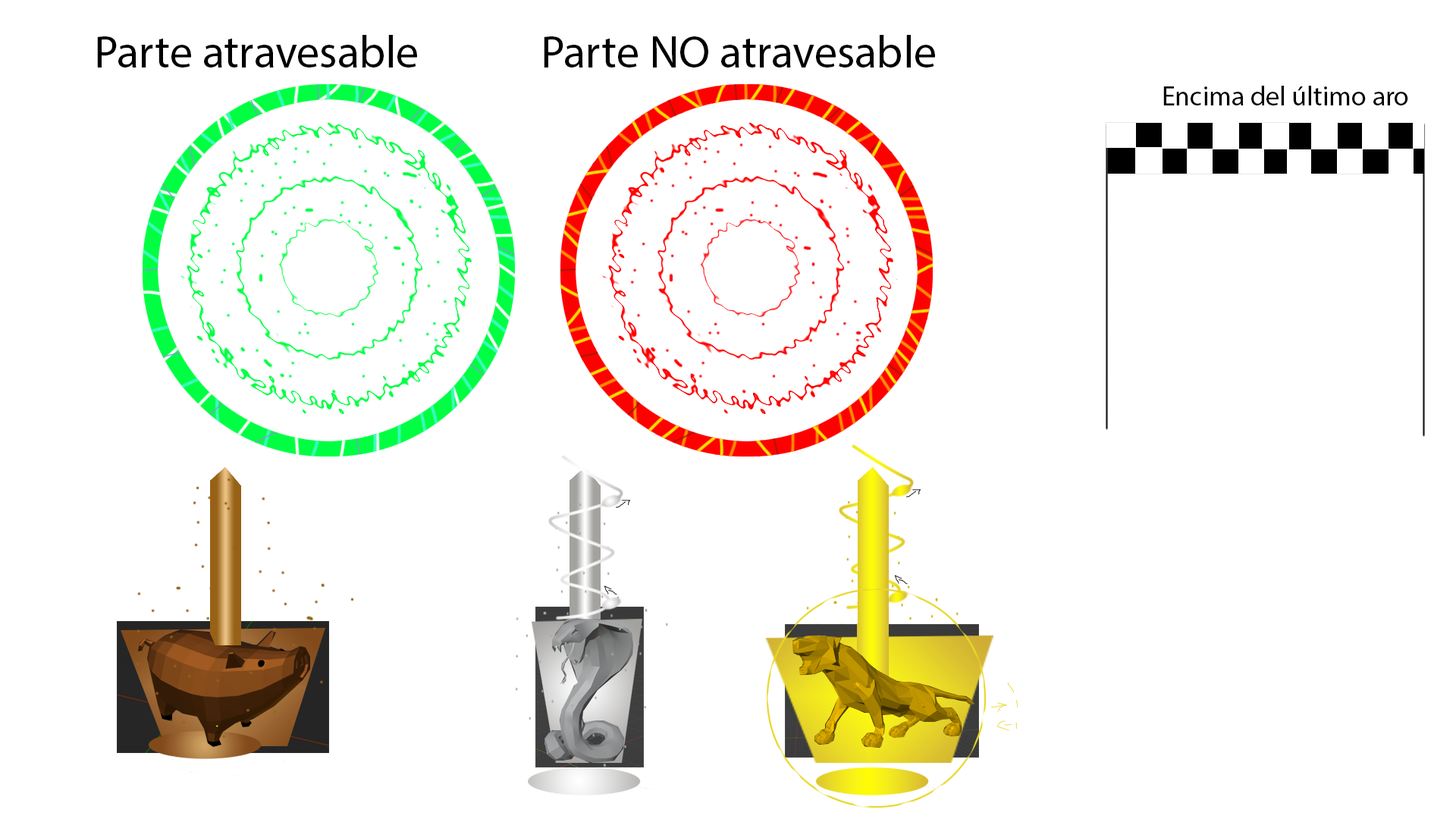
<style>
.page{position:relative;width:1456px;height:819px;background:#ffffff}
.page>*{position:absolute;margin:0}
.t1{font:45.5px "MyriadPro-Regular";color:#000000}
.t2{font:27.3px "MyriadPro-Regular";color:#000000}
</style>
<div class="page">
<p class="t1" style="left:97px;top:35px;width:320px;height:32px">Parte atravesable</p>
<p class="t1" style="left:544px;top:35px;width:391px;height:32px">Parte NO atravesable</p>
<p class="t2" style="left:1163px;top:86px;width:245px;height:19px">Encima del último aro</p>
</div>
